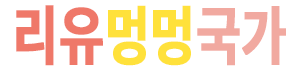
<style>
.page{position:relative;width:300px;height:70px;background:#ffffff}
.page>*{position:absolute;margin:0}
.t1{font:64px "NotoSansKR-Bold";letter-spacing:-0.025em;color:#ef7869;font-weight:bold;scale:0.77 1}
.t2{font:64px "NotoSansKR-Bold";letter-spacing:-0.025em;color:#ffe13b;font-weight:bold;scale:0.77 1}
.t3{font:64px "NotoSansKR-Bold";letter-spacing:-0.025em;color:#f1a9a0;font-weight:bold;scale:0.77 1}
</style>
<div class="page">
<p class="t1" style="left:16px;top:5px;width:270px;height:61px">리유<span class="t2">멍멍</span><span class="t3">국가</span></p>
</div>
